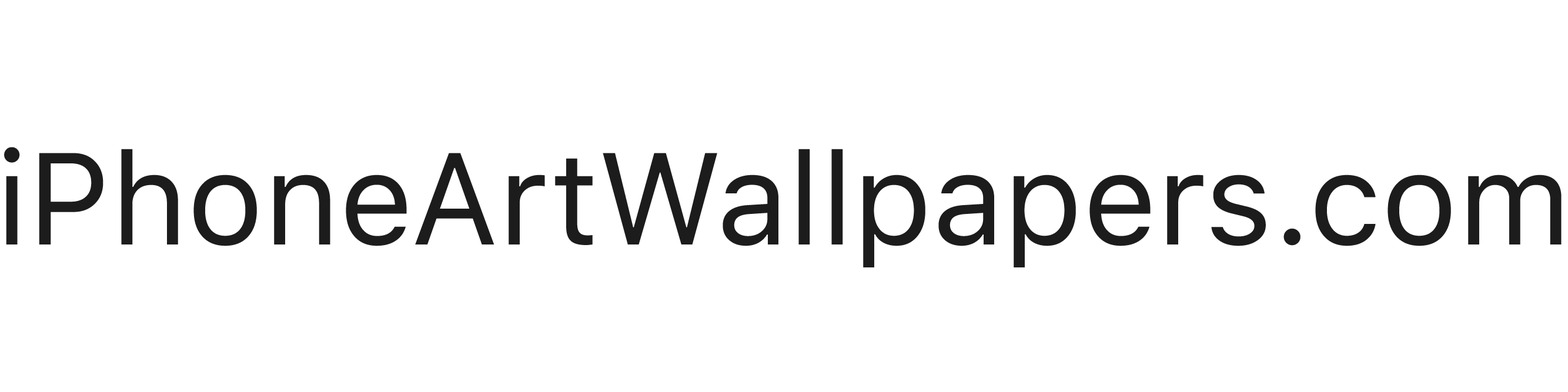
<style>
.page{position:relative;width:1568px;height:392px;background:#ffffff}
.page>*{position:absolute;margin:0}
.t1{font:129.7px "SFProText-Regular";color:#1c1c1c}
</style>
<div class="page">
<p class="t1" style="left:4px;top:147px;width:1558px;height:121px">iPhoneArtWallpapers.com</p>
</div>
